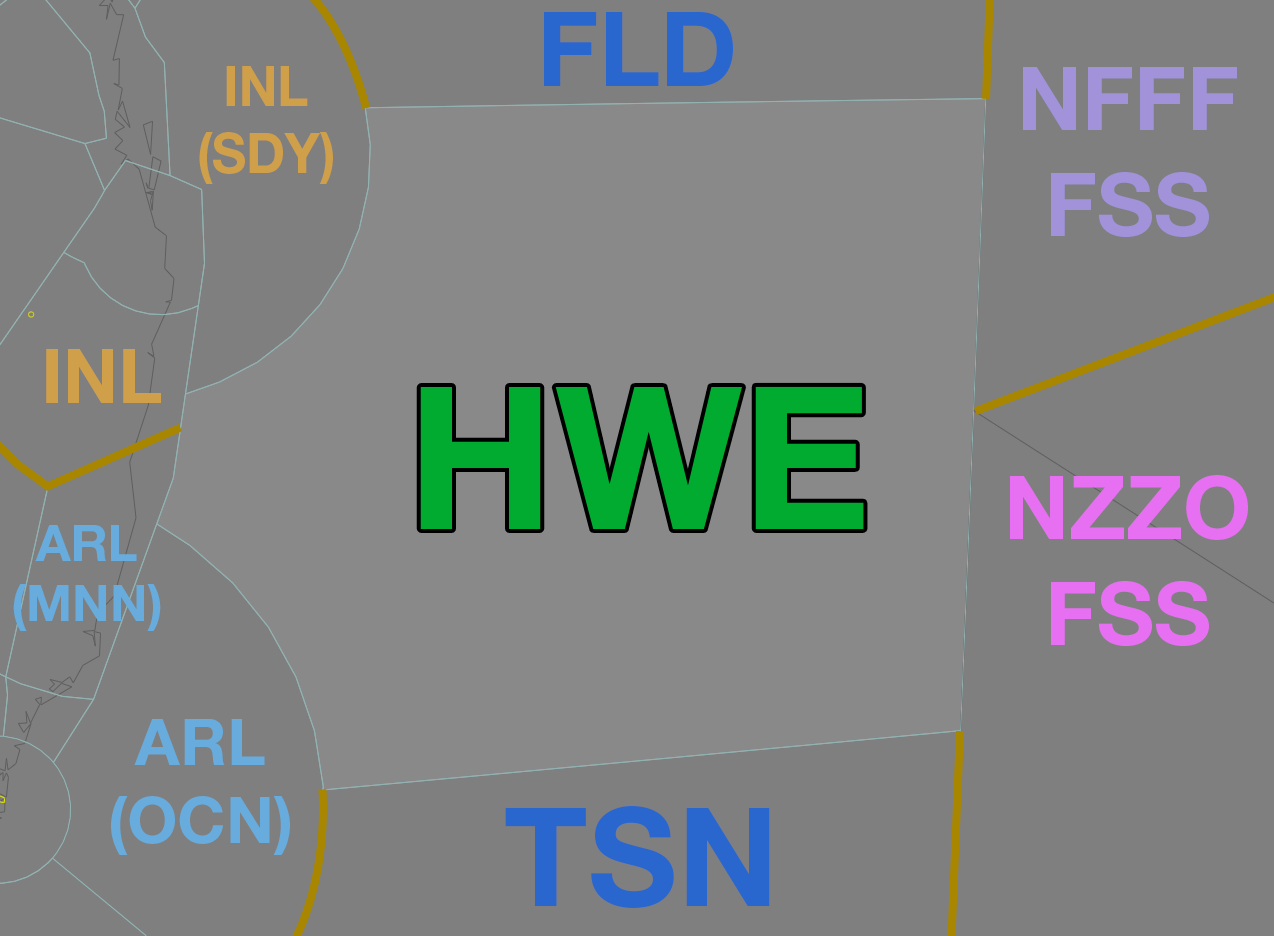
<style>
.page{position:relative;width:1274px;height:936px;background:#7f7f7f}
.page>*{position:absolute;margin:0}
.t1{font:104px "HelveticaNeueLTStd-Bd";color:#2967cf}
.t2{font:56.1px "HelveticaNeueLTStd-Bd";color:#d09f4a;scale:0.93 1}
.t3{font:87.9px "HelveticaNeueLTStd-Bd";color:#a192da}
.t4{font:75px "HelveticaNeueLTStd-Bd";color:#d09f4a}
.t5{font:198.6px "HelveticaNeueLTStd-Bd";color:#00ab30}
.t6{font:87.9px "HelveticaNeueLTStd-Bd";color:#e670f1}
.t7{font:50.7px "HelveticaNeueLTStd-Bd";color:#67acdc}
.t8{font:65px "HelveticaNeueLTStd-Bd";color:#67acdc}
.t9{font:137.3px "HelveticaNeueLTStd-Bd";color:#2967cf}
</style>
<div class="page">
<p class="t1" style="left:544px;top:12px;width:189px;height:74px">FLD</p>
<p class="t2" style="left:199px;top:66px;width:134px;height:118px;text-align:center">INL<br>(SDY)</p>
<p class="t3" style="left:1023px;top:67px;width:214px;height:170px;text-align:center">NFFF<br>FSS</p>
<p class="t4" style="left:46px;top:349px;width:115px;height:54px">INL</p>
<p class="t5" style="left:420px;top:386px;width:444px;height:143px">HWE</p>
<p class="t6" style="left:1010px;top:475px;width:238px;height:171px;text-align:center">NZZO<br>FSS</p>
<p class="t7" style="left:13px;top:525px;width:148px;height:106px;text-align:center">ARL<br>(MNN)</p>
<p class="t8" style="left:111px;top:719px;width:179px;height:136px;text-align:center">ARL<br>(OCN)</p>
<p class="t9" style="left:505px;top:806px;width:265px;height:102px">TSN</p>
</div>
